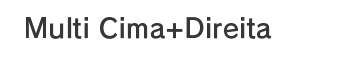
<style>
.page{position:relative;width:342px;height:60px;background:#ffffff}
.page>*{position:absolute;margin:0}
.t1{font:26.7px "RodinPro-DB";letter-spacing:0.008em;color:#383738}
</style>
<div class="page">
<p class="t1" style="left:26px;top:17px;width:246px;height:22px">Multi Cima+Direita</p>
</div>
